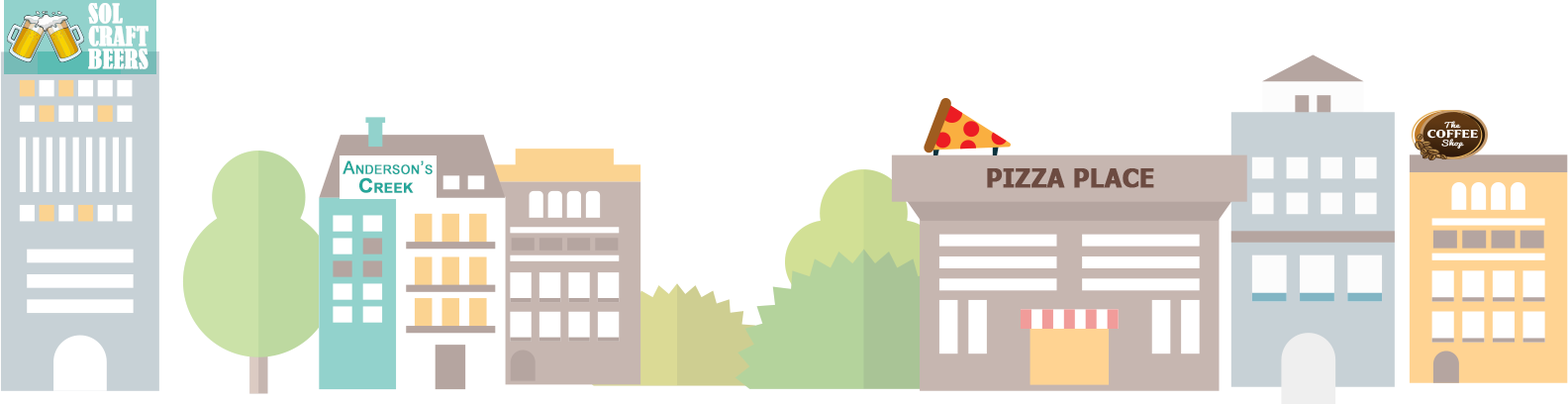
<style>
.page{position:relative;width:1568px;height:404px;background:#ffffff}
.page>*{position:absolute;margin:0}
.t1{font:24.7px/22.8px "BernardMT-Condensed";color:#ffffff;font-variant:small-caps;font-weight:bold}
.t2{font:17.8px "ArialMT";color:#25a69a;font-variant:small-caps;font-weight:bold}
.t3{font:24.7px "Tahoma-Bold";color:#6c4b41;font-weight:bold}
.t4{font:19.8px "Arial-BoldMT";color:#25a69a;font-variant:small-caps;font-weight:bold}
</style>
<div class="page">
<p class="t1" style="left:88px;top:3px;width:60px;height:66px">SOL<br>CRAFT<br>BEERS</p>
<p class="t2" style="left:343px;top:160px;width:90px;height:14px">Anderson’s</p>
<p class="t3" style="left:987px;top:168px;width:167px;height:20px">PIZZA PLACE</p>
<p class="t4" style="left:359px;top:177px;width:55px;height:16px">Creek</p>
</div>
